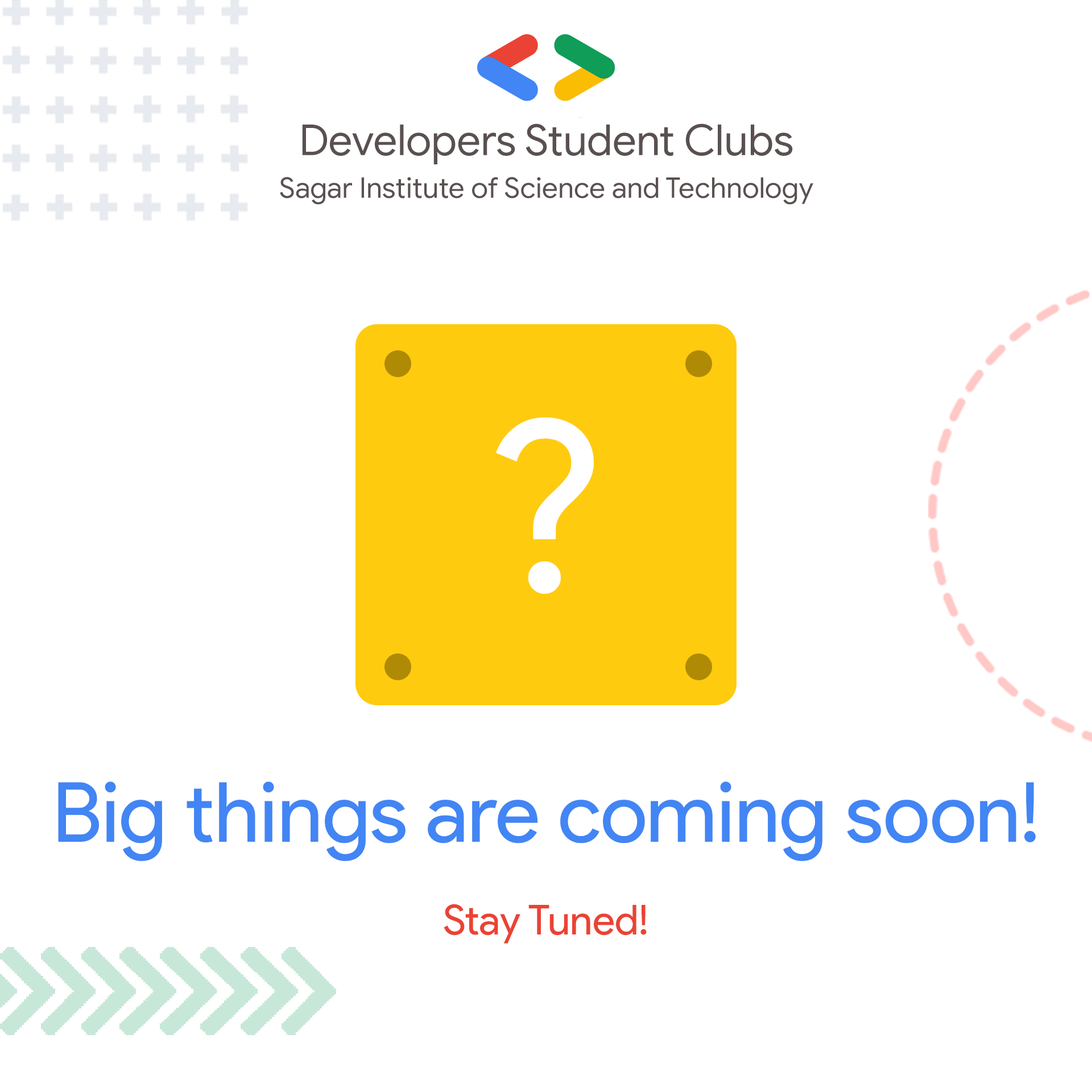
<style>
.page{position:relative;width:1092px;height:1092px;background:#ffffff}
.page>*{position:absolute;margin:0}
.t1{font:28.4px/42.7px "GoogleSans-Regular";color:#5a5050}
.t2{font:42.7px/42.7px "GoogleSans-Regular";color:#5a5050}
.t3{font:238.9px "ProductSans-Regular";color:#ffffff}
.t4{font:82.8px/46.5px "ProductSans-Regular";color:#4285f4}
.t5{font:41.4px/46.5px "ProductSans-Regular";color:#ea4335}
</style>
<div class="page">
<p class="t1" style="left:280px;top:123px;width:533px;height:82px;text-align:center"><span class="t2">Developers Student Clubs<br></span>Sagar Institute of Science and Technology</p>
<p class="t3" style="left:496px;top:417px;width:98px;height:177px">?</p>
<p class="t4" style="left:58px;top:781px;width:978px;height:163px;text-align:center">Big things are coming soon!<br><br><span class="t5">Stay Tuned!</span></p>
</div>
